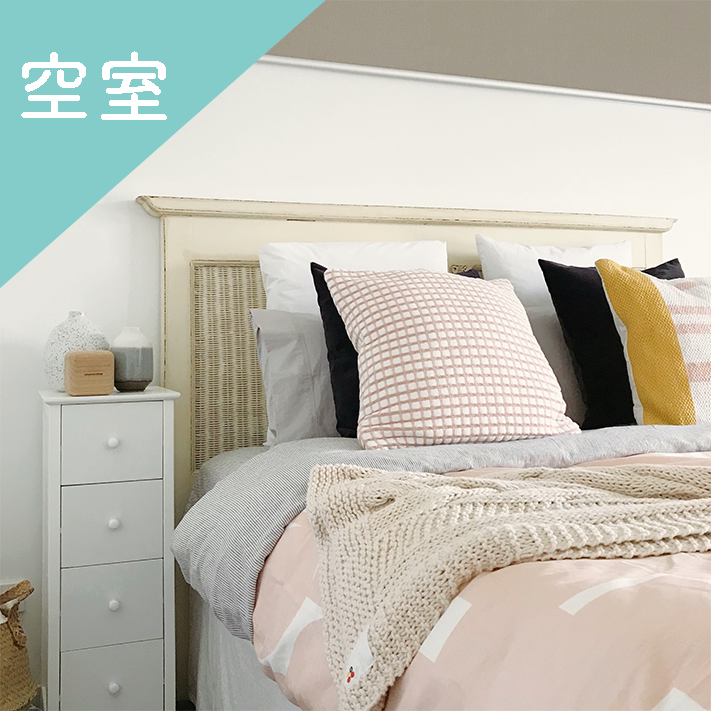
<style>
.page{position:relative;width:711px;height:711px}
.page>*{position:absolute;margin:0}
.t1{font:80px "TsukuARdGothicStd-B";letter-spacing:0.01em;color:#ffffff}
</style>
<div class="page">
<p class="t1" style="left:21px;top:51px;width:146px;height:69px">空室</p>
</div>
